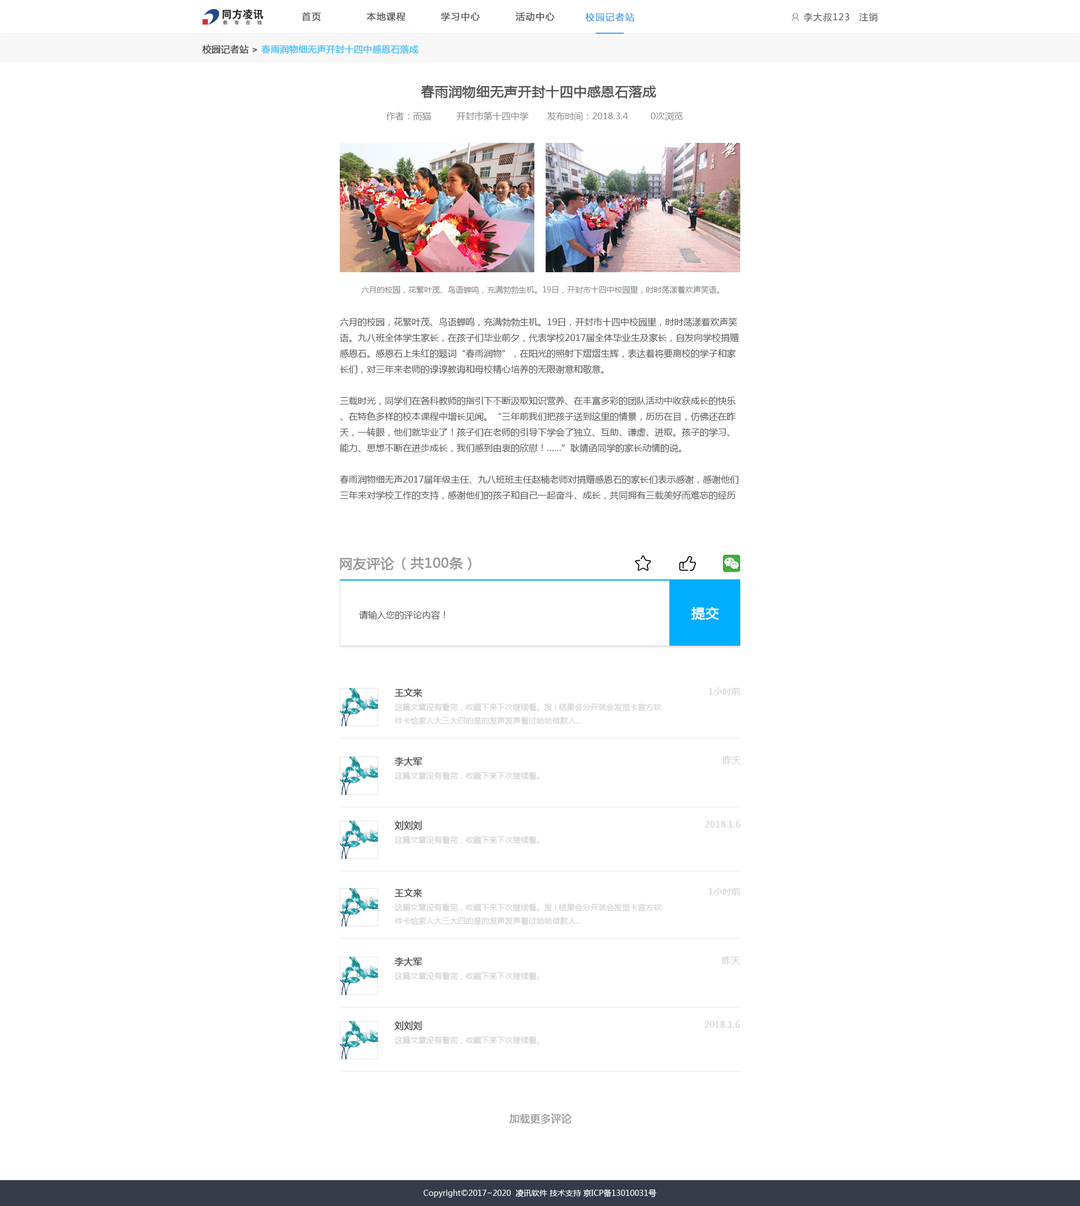
<style>
.page{position:relative;width:1080px;height:1206px;background:#ffffff}
.page>*{position:absolute;margin:0}
.t1{font:9px "MicrosoftYaHei";letter-spacing:0.075em;color:#555555;font-weight:bold}
.t2{font:9px "MicrosoftYaHei";letter-spacing:0.075em;color:#54a0e6;font-weight:bold}
.t3{font:9px "MicrosoftYaHei";letter-spacing:0.075em;color:#555555}
.t4{font:9px "MicrosoftYaHei";color:#4dc4fc;font-weight:bold}
.t5{font:9px "MicrosoftYaHei";color:#555555;font-weight:bold}
.t6{font:13.5px "MicrosoftYaHei";color:#555555;font-weight:bold}
.t7{font:9px "MicrosoftYaHei";color:#8a8a8a}
.t8{font:7.9px "MicrosoftYaHei";color:#8a8a8a}
.t9{font:9px "MicrosoftYaHei";color:#555555}
.t10{font:13.5px "MicrosoftYaHei";color:#979797;font-weight:bold}
.t11{font:13.5px "MicrosoftYaHei";color:#ffffff;font-weight:bold}
.t12{font:9px "MicrosoftYaHei";color:#cecece}
.t13{font:7.9px "MicrosoftYaHei";color:#cecece}
.t14{font:10.1px "MicrosoftYaHei";color:#979797;font-weight:bold}
.t15{font:7.9px "MicrosoftYaHei";color:#ffffff}
</style>
<div class="page">
<p class="t1" style="left:302px;top:12px;width:19px;height:9px">首页</p>
<p class="t1" style="left:367px;top:12px;width:39px;height:9px">本地课程</p>
<p class="t1" style="left:441px;top:12px;width:39px;height:9px">学习中心</p>
<p class="t1" style="left:516px;top:12px;width:39px;height:9px">活动中心</p>
<p class="t2" style="left:586px;top:12px;width:48px;height:10px">校园记者站</p>
<p class="t3" style="left:803px;top:12px;width:46px;height:10px">李大叔123</p>
<p class="t3" style="left:859px;top:12px;width:19px;height:9px">注销</p>
<p class="t4" style="left:202px;top:44px;width:216px;height:10px"><span class="t5">校园记者站 &gt;</span> 春雨润物细无声开封十四中感恩石落成</p>
<p class="t6" style="left:421px;top:85px;width:235px;height:14px">春雨润物细无声开封十四中感恩石落成</p>
<p class="t7" style="left:386px;top:111px;width:45px;height:10px">作者：而猫</p>
<p class="t7" style="left:456px;top:111px;width:73px;height:10px">开封市第十四中学</p>
<p class="t7" style="left:547px;top:112px;width:81px;height:8px">发布时间：2018.3.4</p>
<p class="t7" style="left:651px;top:112px;width:32px;height:8px">0次浏览</p>
<p class="t8" style="left:361px;top:286px;width:358px;height:8px">六月的校园，花繁叶茂、鸟语蝉鸣，充满勃勃生机。19日，开封市十四中校园里，时时荡漾着欢声笑语。</p>
<p class="t9" style="left:340px;top:317px;width:399px;height:183px">六月的校园，花繁叶茂、鸟语蝉鸣，充满勃勃生机。19日，开封市十四中校园里，时时荡漾着欢声笑语。九八班全体学生家长，在孩子们毕业前夕，代表学校2017届全体毕业生及家长，自发向学校捐赠感恩石。感恩石上朱红的题词“春雨润物”，在阳光的照射下熠熠生辉，表达着将要离校的学子和家长们，对三年来老师的谆谆教诲和母校精心培养的无限谢意和敬意。<br><br>三载时光，同学们在各科教师的指引下不断汲取知识营养、在丰富多彩的团队活动中收获成长的快乐、在特色多样的校本课程中增长见闻。“三年前我们把孩子送到这里的情景，历历在目，仿佛还在昨天，一转眼，他们就毕业了！孩子们在老师的引导下学会了独立、互助、谦虚、进取。孩子的学习、能力、思想不断在进步成长，我们感到由衷的欣慰！……”耿靖函同学的家长动情的说。<br><br>春雨润物细无声2017届年级主任、九八班班主任赵楠老师对捐赠感恩石的家长们表示感谢，感谢他们三年来对学校工作的支持，感谢他们的孩子和自己一起奋斗、成长，共同拥有三载美好而难忘的经历</p>
<p class="t10" style="left:340px;top:557px;width:54px;height:13px">网友评论</p>
<p class="t10" style="left:402px;top:557px;width:69px;height:13px">（共100条）</p>
<p class="t9" style="left:359px;top:610px;width:87px;height:10px">请输入您的评论内容！</p>
<p class="t11" style="left:691px;top:607px;width:28px;height:13px">提交</p>
<p class="t5" style="left:394px;top:688px;width:28px;height:10px">王文来</p>
<p class="t12" style="left:709px;top:687px;width:31px;height:8px">1小时前</p>
<p class="t13" style="left:394px;top:703px;width:268px;height:22px">这篇文章没有看完，收藏下来下次继续看。发 i 结果会分开就会发觉卡官方软<br>件卡给家人大三大四的是的发声发声看过哈哈借款人...</p>
<p class="t5" style="left:394px;top:757px;width:28px;height:9px">李大军</p>
<p class="t12" style="left:723px;top:755px;width:18px;height:9px">昨天</p>
<p class="t13" style="left:394px;top:772px;width:145px;height:8px">这篇文章没有看完，收藏下来下次继续看。</p>
<p class="t5" style="left:394px;top:821px;width:28px;height:9px">刘刘刘</p>
<p class="t12" style="left:705px;top:821px;width:36px;height:6px">2018.1.6</p>
<p class="t13" style="left:394px;top:836px;width:145px;height:8px">这篇文章没有看完，收藏下来下次继续看。</p>
<p class="t5" style="left:394px;top:888px;width:28px;height:10px">王文来</p>
<p class="t12" style="left:709px;top:888px;width:31px;height:8px">1小时前</p>
<p class="t13" style="left:394px;top:903px;width:268px;height:22px">这篇文章没有看完，收藏下来下次继续看。发 i 结果会分开就会发觉卡官方软<br>件卡给家人大三大四的是的发声发声看过哈哈借款人...</p>
<p class="t5" style="left:394px;top:957px;width:28px;height:9px">李大军</p>
<p class="t12" style="left:722px;top:956px;width:18px;height:9px">昨天</p>
<p class="t13" style="left:394px;top:972px;width:145px;height:8px">这篇文章没有看完，收藏下来下次继续看。</p>
<p class="t5" style="left:394px;top:1021px;width:28px;height:9px">刘刘刘</p>
<p class="t12" style="left:704px;top:1021px;width:36px;height:7px">2018.1.6</p>
<p class="t13" style="left:394px;top:1036px;width:145px;height:9px">这篇文章没有看完，收藏下来下次继续看。</p>
<p class="t14" style="left:509px;top:1114px;width:63px;height:10px">加载更多评论</p>
<p class="t15" style="left:424px;top:1189px;width:232px;height:9px">Copyright©2017~2020  凌讯软件 技术支持 京ICP备13010031号</p>
</div>
